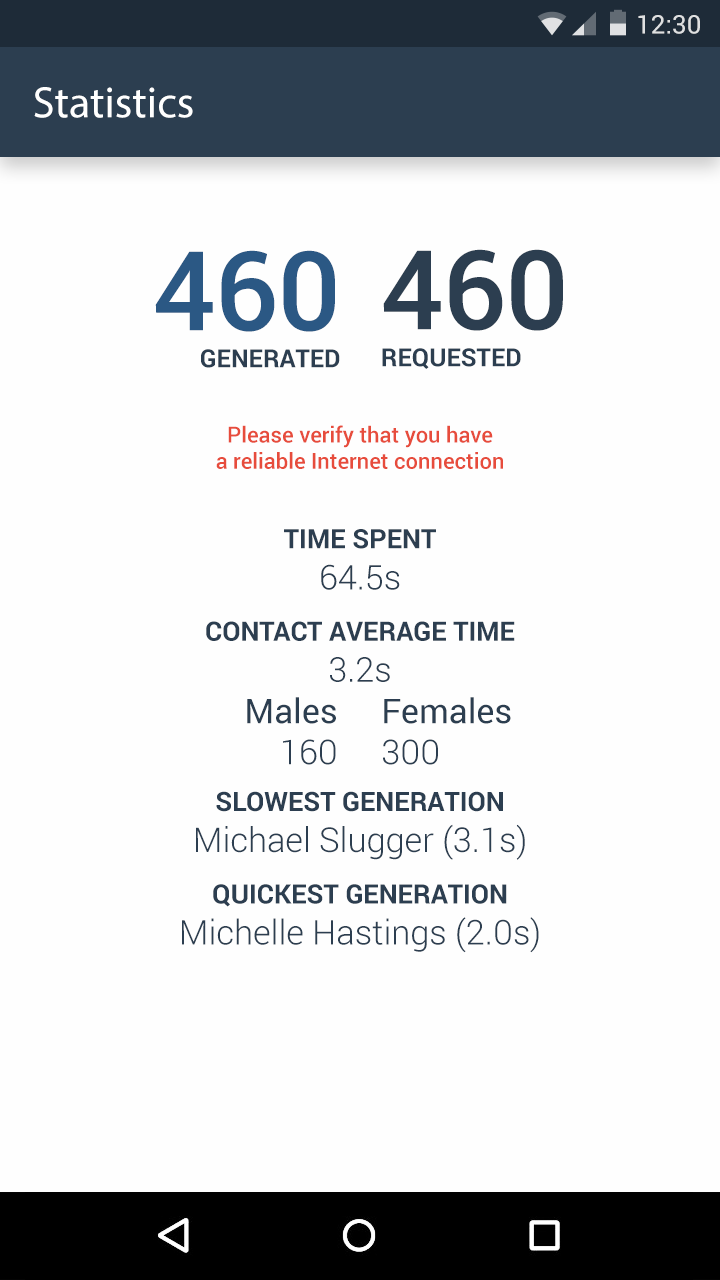
<style>
.page{position:relative;width:720px;height:1280px;background:#fefefe}
.page>*{position:absolute;margin:0}
.t1{font:44px "Roboto-Medium";color:#ffffff}
.t2{font:25px "Roboto-Bold";color:#2c3e50}
.t3{font:110px "Roboto-Medium";color:#2b5884}
.t4{font:110px "Roboto-Medium";color:#2c3e50}
.t5{font:22px "Roboto-Medium";color:#e74c3c}
.t6{font:26.7px "Roboto-Bold";color:#2c3e50}
.t7{font:34.2px "Roboto-Light";color:#2c3e50}
.t8{font:34.2px "Roboto-Regular";color:#2c3e50}
</style>
<div class="page">
<p class="t1" style="left:34px;top:87px;width:159px;height:31px">Statistics</p>
<p class="t2" style="left:155px;top:250px;width:185px;height:118px;text-align:right"><span class="t3">460 <br><br></span>GENERATED</p>
<p class="t2" style="left:382px;top:249px;width:181px;height:120px"><span class="t4">460 <br><br></span>REQUESTED</p>
<p class="t5" style="left:216px;top:425px;width:287px;height:44px;text-align:center">Please verify that you have <br>a reliable Internet connection</p>
<p class="t6" style="left:206px;top:529px;width:309px;height:153px;text-align:center">TIME SPENT<br><span class="t7">64.5s<br><br></span>CONTACT AVERAGE TIME<br><span class="t7">3.2s</span></p>
<p class="t8" style="left:247px;top:697px;width:89px;height:68px;text-align:right">Males<br><span class="t7">160</span></p>
<p class="t8" style="left:383px;top:697px;width:128px;height:68px">Females<br><span class="t7">300</span></p>
<p class="t7" style="left:182px;top:791px;width:357px;height:162px;text-align:center"><span class="t6">SLOWEST GENERATION<br></span>Michael Slugger (3.1s)<br><br><span class="t6">QUICKEST GENERATION<br></span>Michelle Hastings (2.0s)</p>
</div>
